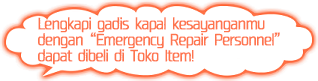
<style>
.page{position:relative;width:318px;height:81px;background:#ffffff}
.page>*{position:absolute;margin:0}
.t1{font:15px/16px "04KanjyukuGothic";letter-spacing:-0.08em;color:#fe754e;font-weight:bold;scale:0.9 1}
</style>
<div class="page">
<p class="t1" style="left:38px;top:17px;width:242px;height:48px">Lengkapi gadis kapal kesayanganmu<br>dengan“Emergency Repair Personnel”<br>dapat dibeli di Toko Item!</p>
</div>
